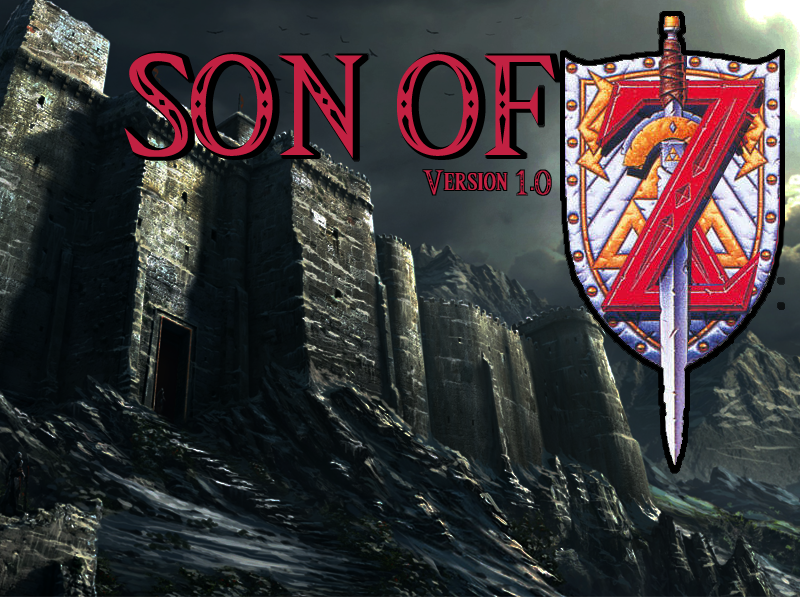
<style>
.page{position:relative;width:800px;height:600px}
.page>*{position:absolute;margin:0}
.t1{font:115px "Triforce";color:#c22142}
.t2{font:28px "Triforce";color:#c22142}
</style>
<div class="page">
<p class="t1" style="left:124px;top:53px;width:431px;height:105px">SON OF</p>
<p class="t2" style="left:423px;top:170px;width:128px;height:25px">Version 1.0</p>
</div>
